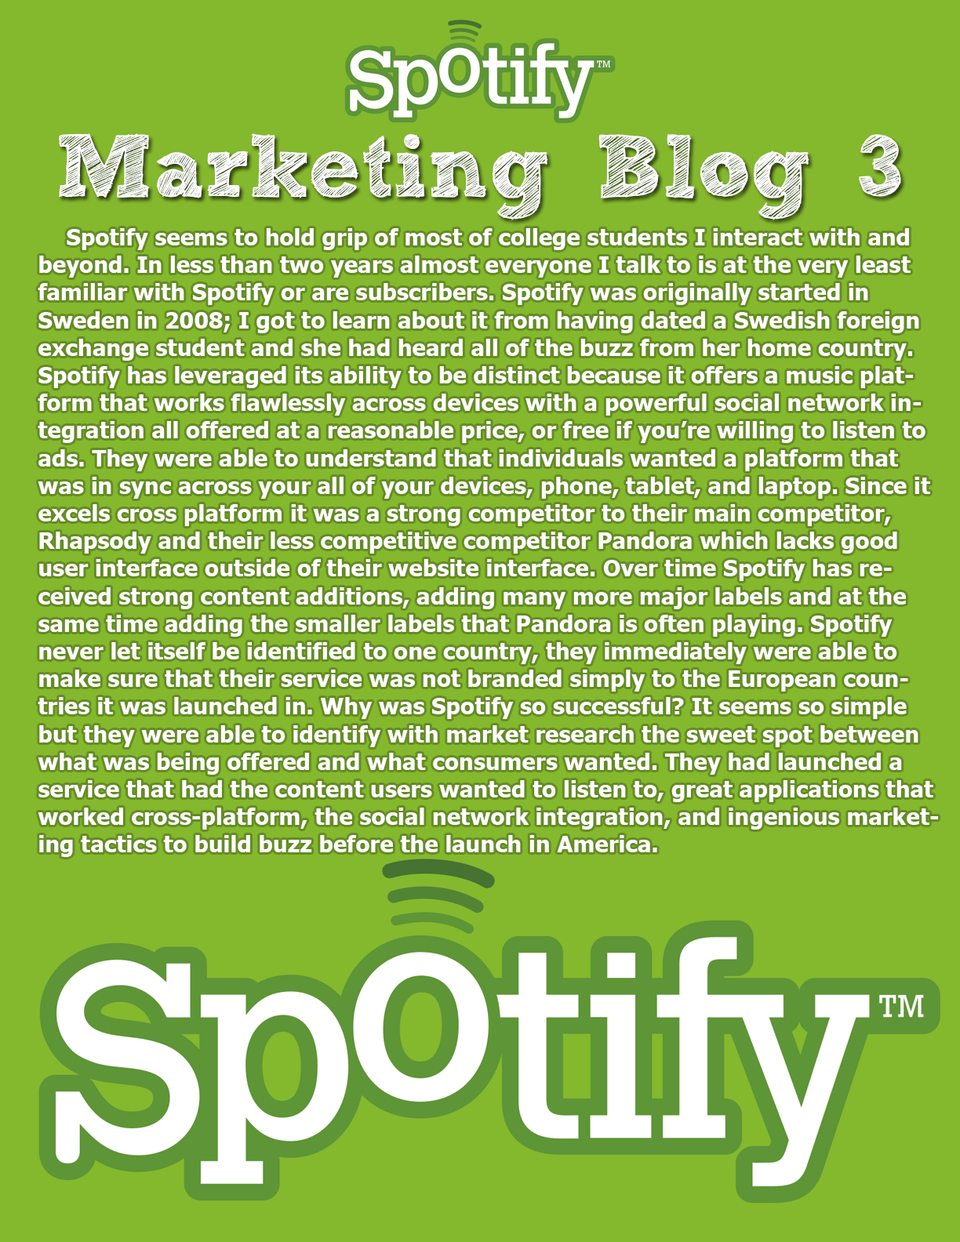
<style>
.page{position:relative;width:960px;height:1242px;background:#84b82d}
.page>*{position:absolute;margin:0}
.t1{font:88.9px "freeversionSketchBlock-Bold";color:#ffffff}
.t2{font:23px "Tahoma-Bold";color:#ffffff}
</style>
<div class="page">
<p class="t1" style="left:59px;top:133px;width:842px;height:87px">Marketing Blog 3</p>
<p class="t2" style="left:38px;top:228px;width:900px;height:629px">Spotify seems to hold grip of most of college students I interact with and beyond. In less than two years almost everyone I talk to is at the very least familiar with Spotify or are subscribers. Spotify was originally started in Sweden in 2008; I got to learn about it from having dated a Swedish foreign exchange student and she had heard all of the buzz from her home country. Spotify has leveraged its ability to be distinct because it offers a music platform that works flawlessly across devices with a powerful social network integration all offered at a reasonable price, or free if you’re willing to listen to ads. They were able to understand that individuals wanted a platform that was in sync across your all of your devices, phone, tablet, and laptop. Since it excels cross platform it was a strong competitor to their main competitor, Rhapsody and their less competitive competitor Pandora which lacks good user interface outside of their website interface. Over time Spotify has received strong content additions, adding many more major labels and at the same time adding the smaller labels that Pandora is often playing. Spotify never let itself be identified to one country, they immediately were able to make sure that their service was not branded simply to the European countries it was launched in. Why was Spotify so successful? It seems so simple but they were able to identify with market research the sweet spot between what was being offered and what consumers wanted. They had launched a service that had the content users wanted to listen to, great applications that worked cross-platform, the social network integration, and ingenious marketing tactics to build buzz before the launch in America.</p>
</div>
